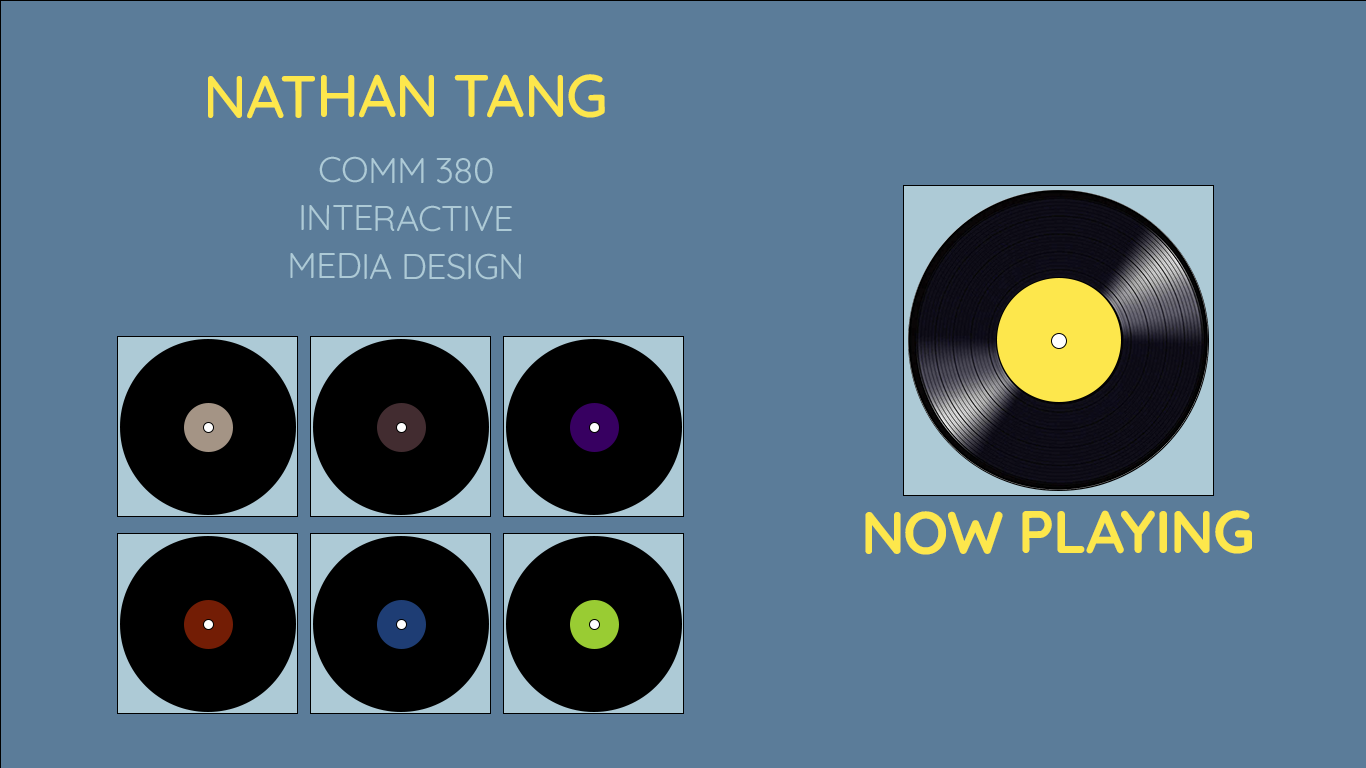
<style>
.page{position:relative;width:1366px;height:768px;background:#5b7c99}
.page>*{position:absolute;margin:0}
.t1{font:60px "Quicksand-Medium";letter-spacing:-0.02em;color:#fde74c;text-transform:uppercase}
.t2{font:36px/48px "Quicksand-Regular";letter-spacing:-0.02em;color:#adcad6;text-transform:uppercase}
.t3{font:60px "Quicksand-Bold";letter-spacing:-0.02em;color:#fde74c;text-transform:uppercase}
</style>
<div class="page">
<p class="t1" style="left:208px;top:74px;width:397px;height:45px">Nathan Tang</p>
<p class="t2" style="left:290px;top:156px;width:231px;height:124px;text-align:center">COMM 380 <br>INTERACTIVE <br>MEDIA DESIGN</p>
<p class="t3" style="left:865px;top:510px;width:387px;height:45px">now playing</p>
</div>
